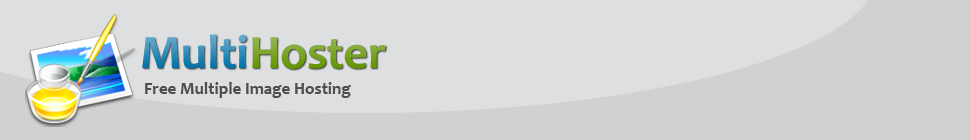
<style>
.page{position:relative;width:970px;height:140px;background:#dedfe0}
.page>*{position:absolute;margin:0}
.t1{font:48.2px "Candara-Bold";letter-spacing:-0.01em}
.t2{font:17px "Candara-Bold";color:#4f4e4e}
</style>
<div class="page">
<p class="t1" style="left:142px;top:34px;width:105px;height:35px">Multi</p>
<p class="t1" style="left:252px;top:37px;width:134px;height:32px">Hoster</p>
<p class="t2" style="left:145px;top:82px;width:206px;height:16px">Free Multiple Image Hosting</p>
</div>
